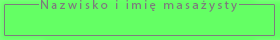
<style>
.page{position:relative;width:280px;height:40px;background:#64ff64}
.page>*{position:absolute;margin:0}
.t1{font:12.5px "MyriadPro-Regular";letter-spacing:0.2em;color:#7c7c7c}
</style>
<div class="page">
<p class="t1" style="left:41px;top:0px;width:196px;height:12px">Nazwisko i imię masażysty</p>
</div>
